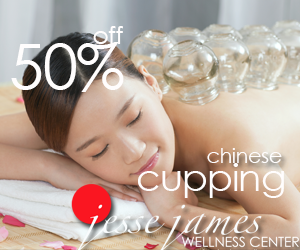
<style>
.page{position:relative;width:300px;height:250px}
.page>*{position:absolute;margin:0}
.t1{font:25px "CenturyGothic";letter-spacing:-0.02em;color:#fffdfd}
.t2{font:62.5px "CenturyGothic";letter-spacing:-0.02em;color:#fffdfd}
.t3{font:20.8px "CenturyGothic";letter-spacing:-0.02em;color:#fffdfd}
.t4{font:37.5px "CenturyGothic";letter-spacing:-0.02em;color:#fffdfd}
</style>
<div class="page">
<p class="t1" style="left:93px;top:26px;width:30px;height:18px">off</p>
<p class="t2" style="left:11px;top:42px;width:113px;height:50px">50%</p>
<p class="t3" style="left:207px;top:148px;width:75px;height:15px">chinese</p>
<p class="t4" style="left:138px;top:163px;width:146px;height:35px">cupping</p>
</div>
